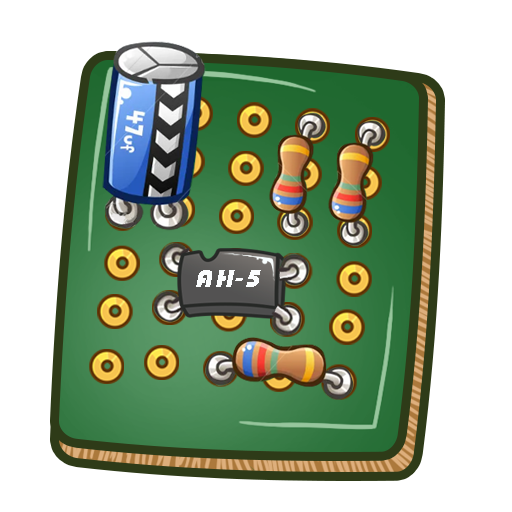
<style>
.page{position:relative;width:512px;height:512px;background:#ffffff}
.page>*{position:absolute;margin:0}
.t1{font:25.3px "Bauhaus93";letter-spacing:0.07em;color:#fbfdfe;font-variant:small-caps;font-style:italic;scale:1.18 1}
</style>
<div class="page">
<p class="t1" style="left:196px;top:270px;width:65px;height:17px">AH-5</p>
</div>
